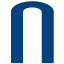
<style>
.page{position:relative;width:64px;height:64px;background:#ffffff}
.page>*{position:absolute;margin:0}
.t1{font:88px "PiemonteRegular";letter-spacing:0.1em;color:#004182;scale:2 1}
</style>
<div class="page">
<p class="t1" style="left:11px;top:1px;width:43px;height:62px">N</p>
</div>
